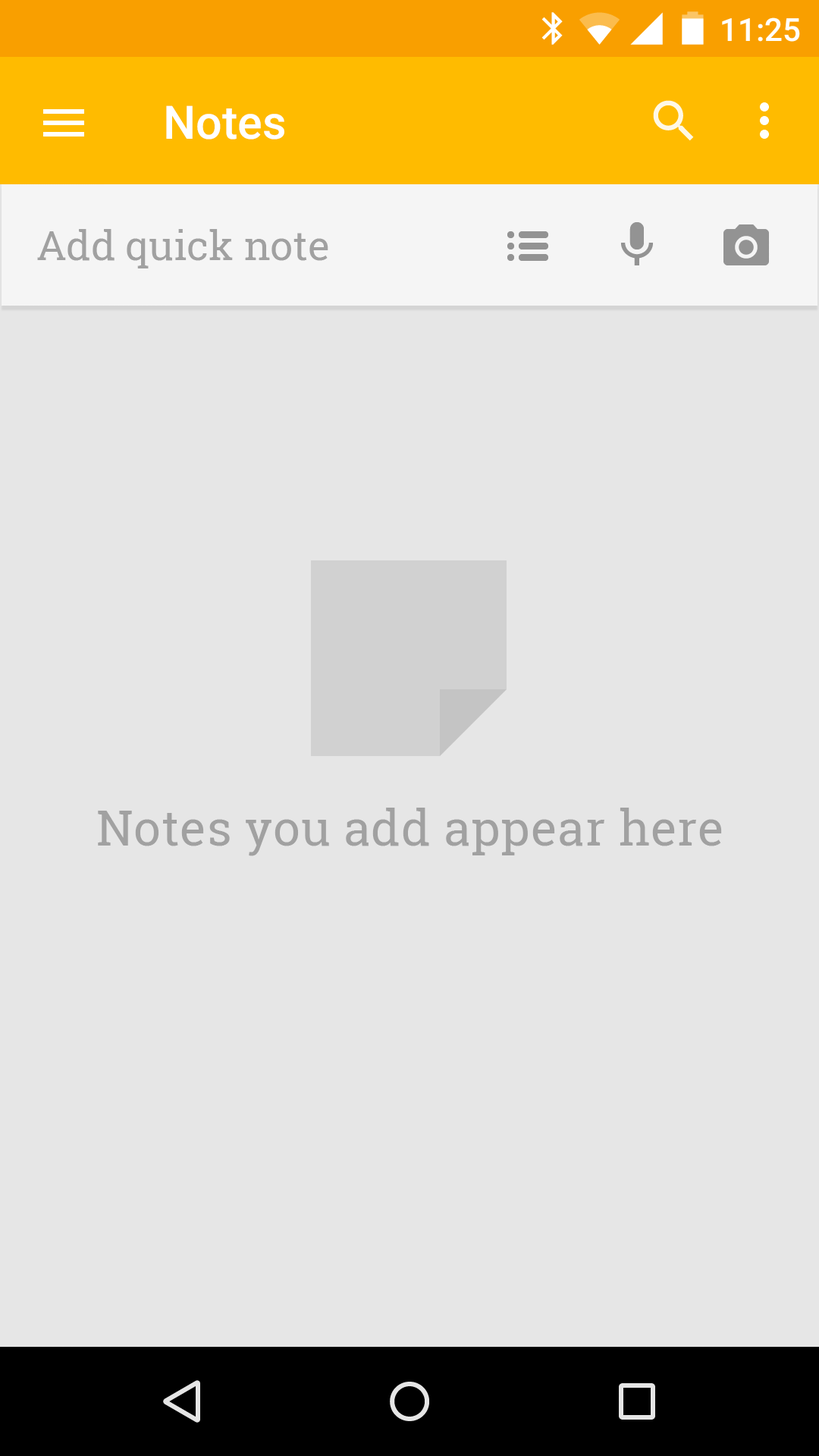
<style>
.page{position:relative;width:819px;height:1456px;background:#e6e6e6}
.page>*{position:absolute;margin:0}
.t1{font:46.3px "Roboto-Medium";color:#ffffff}
.t2{font:40.9px "RobotoSlab-Regular";color:#a1a1a1}
.t3{font:48.5px "RobotoSlab-Regular";letter-spacing:0.014em;color:#a1a1a1}
</style>
<div class="page">
<p class="t1" style="left:166px;top:105px;width:118px;height:35px">Notes</p>
<p class="t2" style="left:37px;top:229px;width:291px;height:39px">Add quick note</p>
<p class="t3" style="left:98px;top:808px;width:624px;height:48px">Notes you add appear here</p>
</div>
